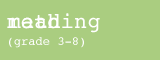
<style>
.page{position:relative;width:160px;height:60px;background:#aacd80}
.page>*{position:absolute;margin:0}
.t1{font:22px "Courier";letter-spacing:0.005em;color:#ffffff}
.t2{font:12px "Courier";letter-spacing:0.005em;color:#ffffff}
</style>
<div class="page">
<p class="t1" style="left:7px;top:14px;width:53px;height:15px">math</p>
<p class="t1" style="left:8px;top:13px;width:92px;height:20px">reading</p>
<p class="t2" style="left:9px;top:37px;width:75px;height:11px">(grade 3-8)</p>
</div>
